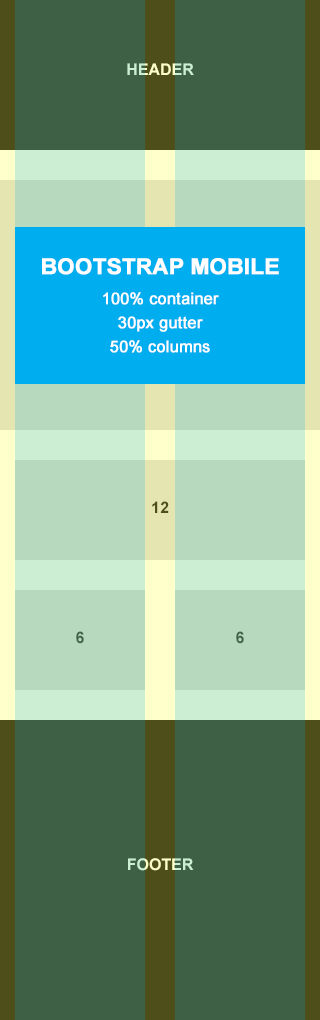
<style>
.page{position:relative;width:320px;height:1020px;background:#3e6145}
.page>*{position:absolute;margin:0}
.t1{font:16px "Arial-BoldMT";text-transform:uppercase}
.t2{font:16px/24px "ArialMT";color:#ffffff;font-weight:bold}
.t3{font:22px/24px "Arial-BoldMT";color:#ffffff;text-transform:uppercase;font-weight:bold}
.t4{font:16px/30px "ArialMT";color:#ffffff;font-weight:bold}
.t5{font:16px "Arial-BoldMT";color:#4e4e1b;text-transform:uppercase}
.t6{font:16px "Arial-BoldMT";color:#3e6145;text-transform:uppercase}
</style>
<div class="page">
<p class="t1" style="left:127px;top:63px;width:67px;height:12px">header</p>
<p class="t2" style="left:42px;top:258px;width:237px;height:95px;text-align:center"><span class="t3">Bootstrap mobile<br></span><span class="t4">100% container<br></span>30px gutter<br>50% columns</p>
<p class="t5" style="left:152px;top:501px;width:17px;height:12px">12</p>
<p class="t6" style="left:76px;top:631px;width:8px;height:13px">6</p>
<p class="t6" style="left:236px;top:631px;width:8px;height:13px">6</p>
<p class="t1" style="left:128px;top:858px;width:66px;height:13px">footer</p>
</div>
